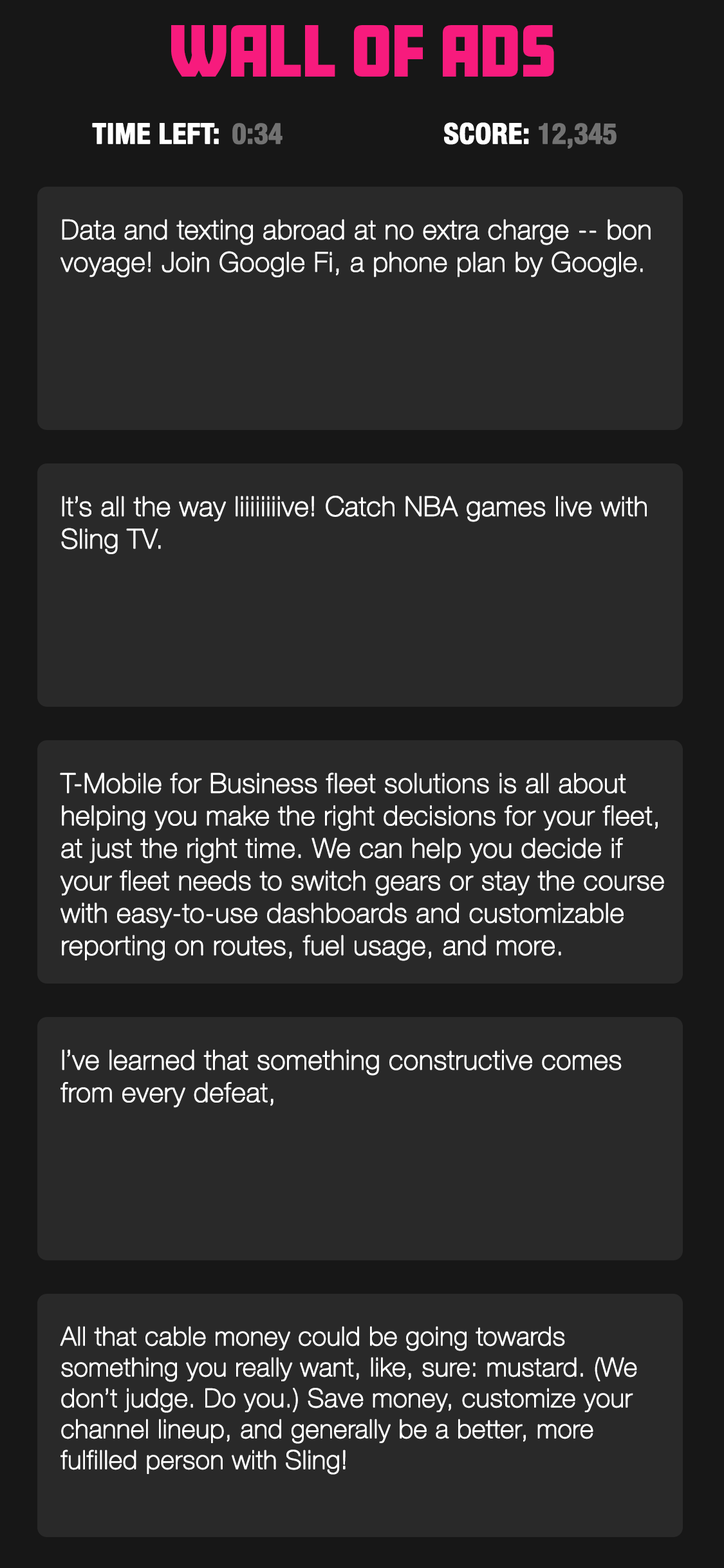
<style>
.page{position:relative;width:724px;height:1568px;background:#292929}
.page>*{position:absolute;margin:0}
.t1{font:64.4px "Amboy-Black";color:#f71b7d}
.t2{font:28.3px "HelveticaNeue-CondensedBold";color:#ffffff;font-weight:bold}
.t3{font:28.3px "HelveticaNeue-CondensedBold";color:#727272;font-weight:bold}
.t4{font:27px "HelveticaNeue-Thin";color:#ffffff;font-weight:bold}
.t5{font:25.7px "HelveticaNeue-Thin";color:#ffffff;font-weight:bold}
</style>
<div class="page">
<p class="t1" style="left:171px;top:25px;width:383px;height:52px">WALL OF ADS</p>
<p class="t2" style="left:92px;top:123px;width:127px;height:21px">TIME LEFT:</p>
<p class="t3" style="left:232px;top:123px;width:51px;height:22px">0:34</p>
<p class="t2" style="left:444px;top:122px;width:85px;height:23px">SCORE:</p>
<p class="t3" style="left:539px;top:123px;width:78px;height:26px">12,345</p>
<p class="t4" style="left:61px;top:219px;width:590px;height:58px">Data and texting abroad at no extra charge -- bon voyage! Join Google Fi, a phone plan by Google.</p>
<p class="t4" style="left:61px;top:496px;width:586px;height:58px">It’s all the way liiiiiiiive! Catch NBA games live with Sling TV.</p>
<p class="t4" style="left:60px;top:772px;width:604px;height:189px">T-Mobile for Business fleet solutions is all about helping you make the right decisions for your fleet, at just the right time. We can help you decide if your fleet needs to switch gears or stay the course with easy-to-use dashboards and customizable reporting on routes, fuel usage, and more.</p>
<p class="t4" style="left:61px;top:1049px;width:561px;height:59px">I’ve learned that something constructive comes from every defeat,</p>
<p class="t5" style="left:60px;top:1326px;width:577px;height:149px">All that cable money could be going towards something you really want, like, sure: mustard. (We don’t judge. Do you.) Save money, customize your channel lineup, and generally be a better, more fulfilled person with Sling!</p>
</div>
